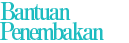
<style>
.page{position:relative;width:129px;height:43px;background:#ffffff}
.page>*{position:absolute;margin:0}
.t1{font:24px/20px "RyuminPro-ExBold";letter-spacing:-0.125em;color:#1dbcc0;scale:0.9 1}
</style>
<div class="page">
<p class="t1" style="left:0px;top:2px;width:104px;height:38px">Bantuan <br>Penembakan</p>
</div>
